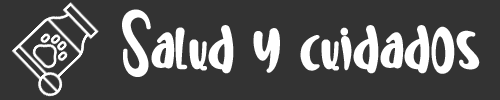
<style>
.page{position:relative;width:500px;height:100px;background:#333333}
.page>*{position:absolute;margin:0}
.t1{font:54.5px "SweetUnicorn";color:#ffffff}
</style>
<div class="page">
<p class="t1" style="left:122px;top:9px;width:358px;height:68px">Salud y cuidados</p>
</div>
